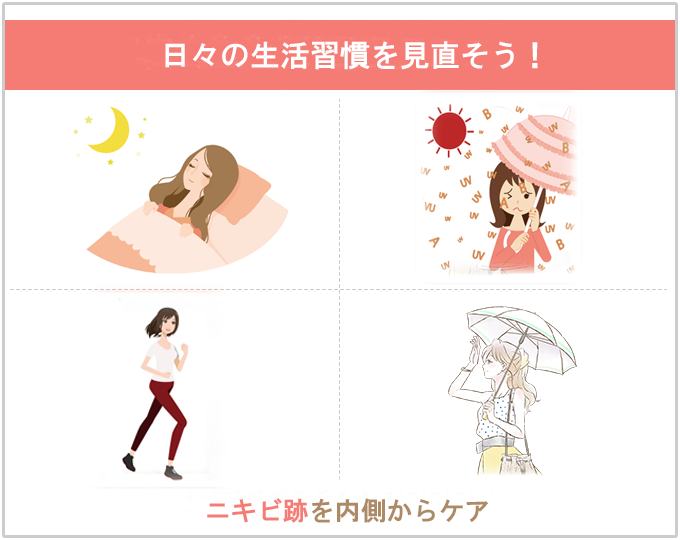
<style>
.page{position:relative;width:680px;height:540px;background:#ffffff}
.page>*{position:absolute;margin:0}
.t1{font:30px "HGGothicE";color:#ffffff}
.t2{font:26px "HGGothicE";color:#ad8a66}
.t3{font:26px "HGGothicE";color:#f57c75}
</style>
<div class="page">
<p class="t1" style="left:165px;top:41px;width:373px;height:29px">日々の生活習慣を見直そう！</p>
<p class="t2" style="left:207px;top:498px;width:281px;height:25px"><span class="t3">ニキビ跡</span>を内側からケア</p>
</div>
